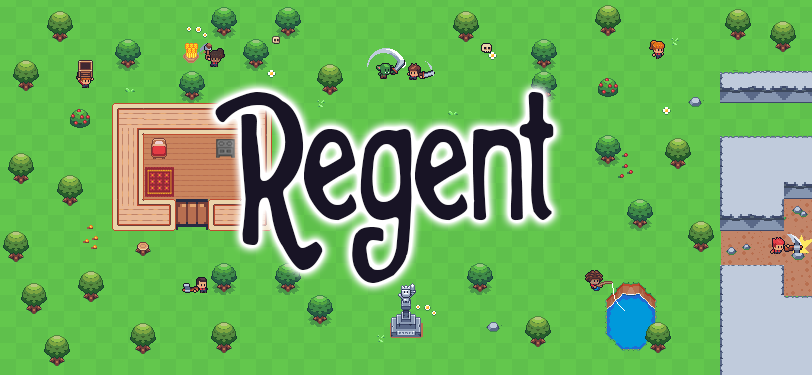
<style>
.page{position:relative;width:812px;height:375px;background:#63c74d}
.page>*{position:absolute;margin:0}
.t1{font:200px "BackToTheFantasy";color:#181425}
</style>
<div class="page">
<p class="t1" style="left:215px;top:92px;width:339px;height:191px">Regent</p>
</div>
